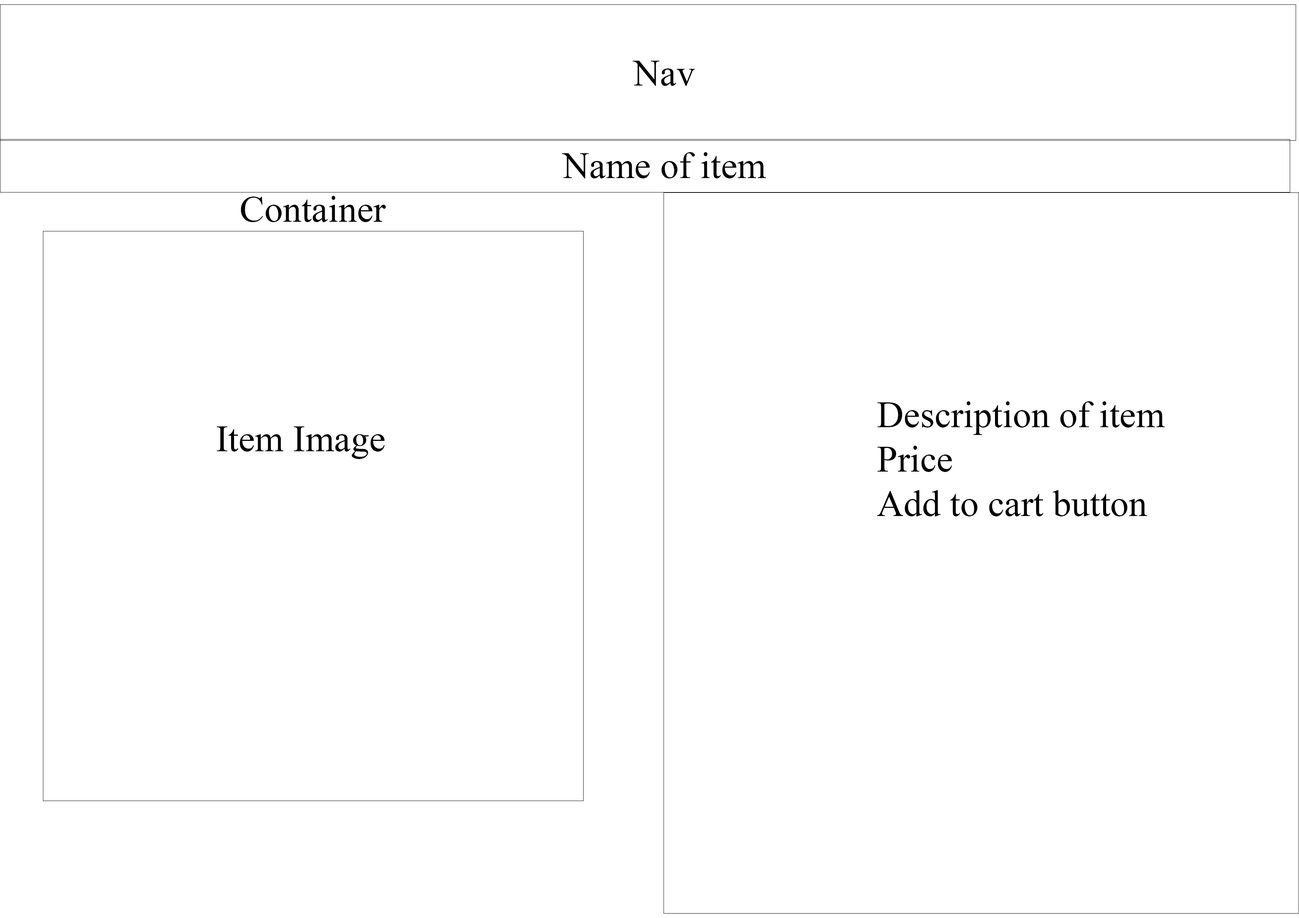
<style>
.page{position:relative;width:1299px;height:918px;background:#ffffff}
.page>*{position:absolute;margin:0}
.t1{font:37px "TimesNewRomanPSMT";color:#000000}
</style>
<div class="page">
<p class="t1" style="left:632px;top:61px;width:63px;height:25px">Nav</p>
<p class="t1" style="left:562px;top:152px;width:204px;height:26px">Name of item</p>
<p class="t1" style="left:241px;top:196px;width:145px;height:26px">Container</p>
<p class="t1" style="left:877px;top:401px;width:288px;height:115px">Description of item <br>Price<br>Add to cart button</p>
<p class="t1" style="left:217px;top:426px;width:168px;height:33px">Item Image</p>
</div>
